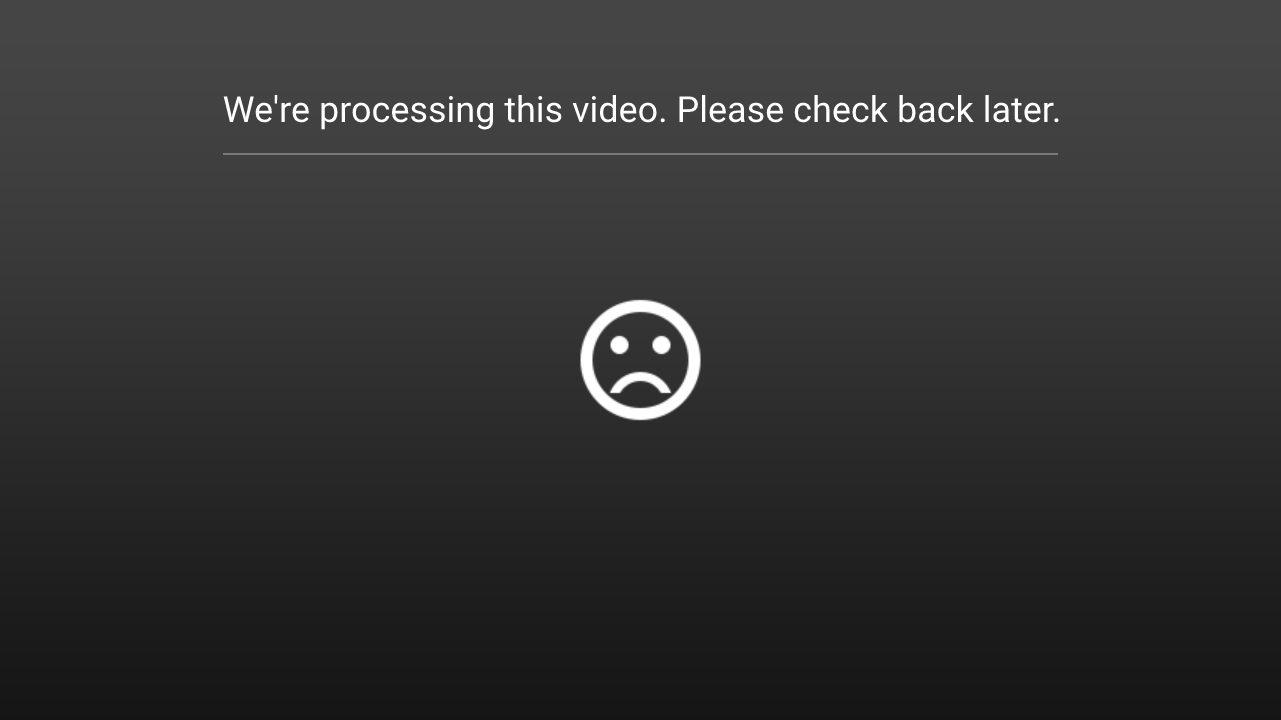
<style>
.page{position:relative;width:1281px;height:720px}
.page>*{position:absolute;margin:0}
.t1{font:36px "Roboto-Regular";color:#ffffff}
</style>
<div class="page">
<p class="t1" style="left:223px;top:95px;width:836px;height:35px">We're processing this video. Please check back later.</p>
</div>
